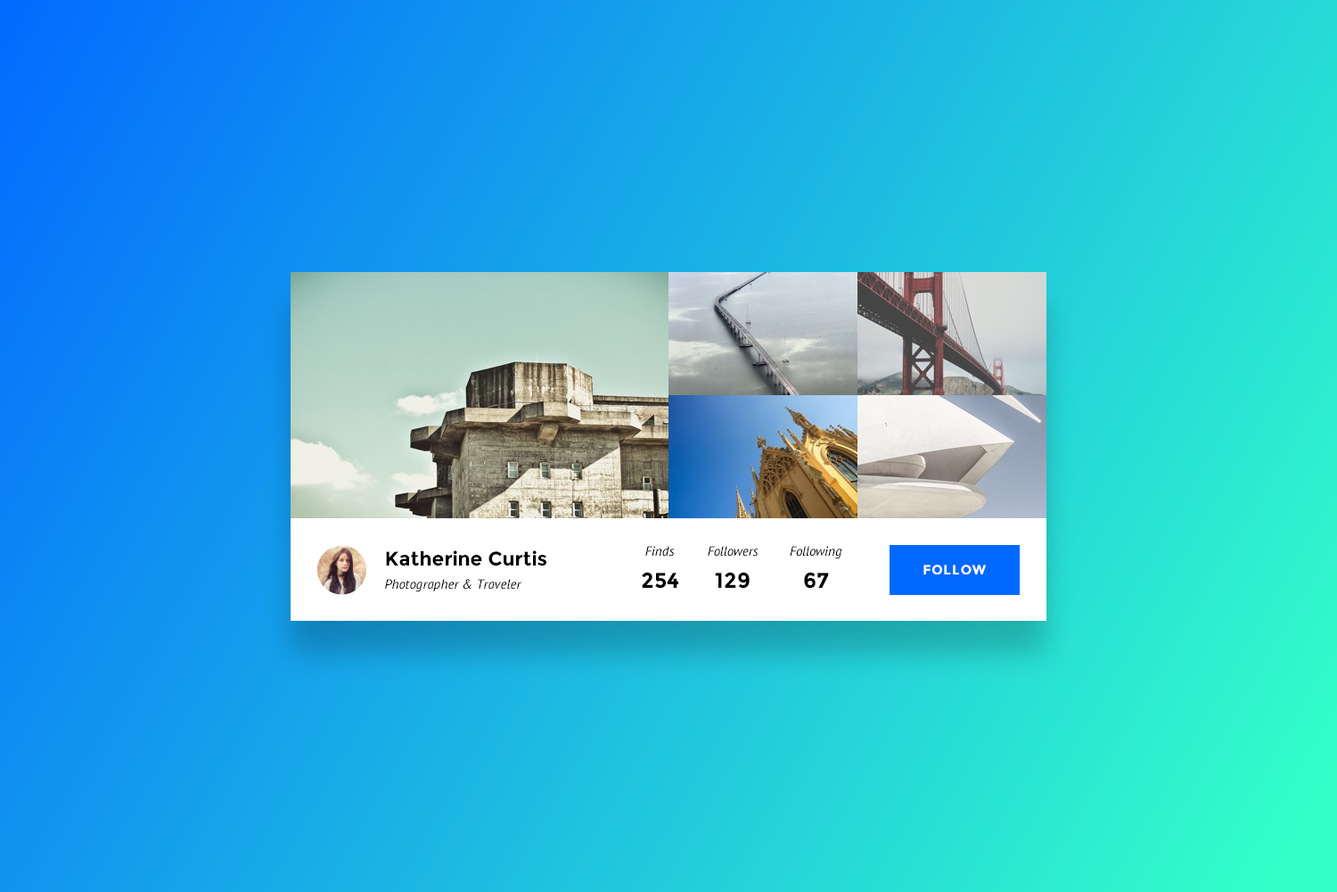
<style>
.page{position:relative;width:1337px;height:892px}
.page>*{position:absolute;margin:0}
.t1{font:13.4px "PTSans-Italic";color:#000000}
.t2{font:19.6px "Montserrat-Bold";color:#000000}
.t3{font:13.4px "Montserrat-Bold";letter-spacing:0.066em;color:#ffffff}
.t4{font:13.4px "Montserrat-Bold";letter-spacing:0.047em;color:#ffffff}
.t5{font:13.4px "Montserrat-Bold";letter-spacing:0.055em;color:#ffffff}
.t6{font:13.4px "Montserrat-Bold";color:#ffffff}
.t7{font:21.4px "Montserrat-Bold";color:#000000}
</style>
<div class="page">
<p class="t1" style="left:646px;top:546px;width:29px;height:10px">Finds</p>
<p class="t1" style="left:708px;top:546px;width:51px;height:10px">Followers</p>
<p class="t1" style="left:790px;top:546px;width:53px;height:13px">Following</p>
<p class="t2" style="left:386px;top:550px;width:161px;height:16px">Katherine Curtis</p>
<p class="t3" style="left:924px;top:564px;width:62px;height:10px">FOL<span class="t4">L</span><span class="t5">O</span><span class="t6">W</span></p>
<p class="t1" style="left:385px;top:579px;width:137px;height:13px">Photographer &amp; Traveler</p>
<p class="t7" style="left:642px;top:572px;width:37px;height:16px">254</p>
<p class="t7" style="left:715px;top:572px;width:35px;height:16px">129</p>
<p class="t7" style="left:804px;top:572px;width:25px;height:16px">67</p>
</div>
